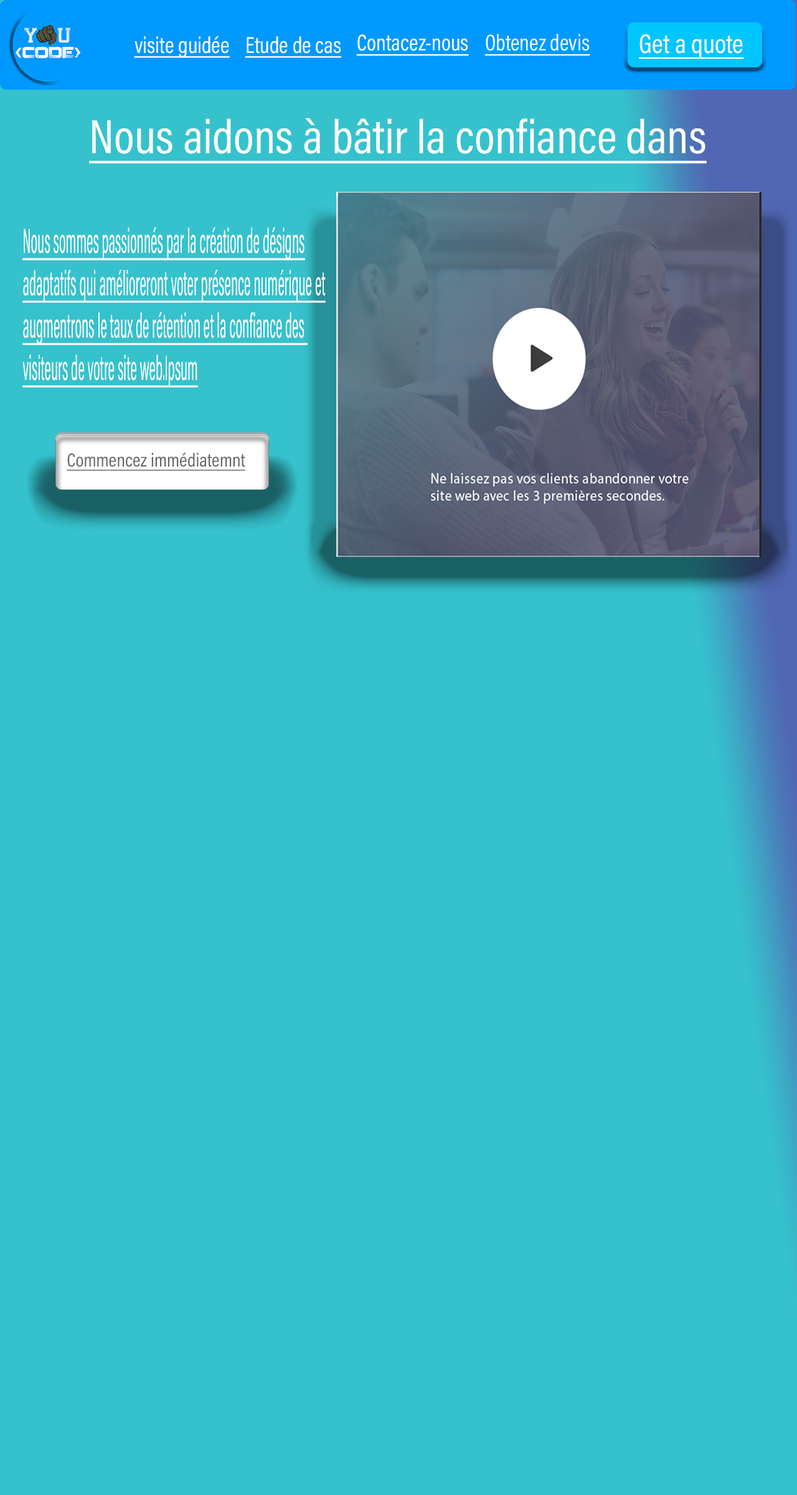
<style>
.page{position:relative;width:797px;height:1495px;background:#35c2cd}
.page>*{position:absolute;margin:0}
.t1{font:23.1px "AcuminConcept-Condensed";color:#ffffff;text-decoration:underline;scale:0.96 1}
.t2{font:27px "AcuminConcept-Condensed";color:#ffffff;text-decoration:underline}
.t3{font:48.4px "AcuminConcept-Condensed";color:#ffffff;text-decoration:underline}
.t4{font:35.3px "AcuminConcept-Condensed";color:#ffffff;text-decoration:underline;scale:0.45 1}
.t5{font:19.2px "AcuminConcept-Condensed";color:#666666;text-decoration:underline}
</style>
<div class="page">
<p class="t1" style="left:134px;top:36px;width:96px;height:22px">visite guidée</p>
<p class="t1" style="left:245px;top:36px;width:96px;height:22px">Etude de cas</p>
<p class="t1" style="left:356px;top:34px;width:113px;height:22px">Contacez-nous</p>
<p class="t2" style="left:639px;top:34px;width:106px;height:25px">Get a quote</p>
<p class="t3" style="left:89px;top:118px;width:618px;height:46px">Nous aidons à bâtir la confiance dans</p>
<p class="t4" style="left:22px;top:227px;width:304px;height:161px">Nous sommes passionnés par la création de désigns<br>adaptatifs qui amélioreront voter présence numérique et<br>augmentrons le taux de rétention et la confiance des <br>visiteurs de votre site web.Ipsum</p>
<p class="t5" style="left:67px;top:452px;width:178px;height:19px">Commencez immédiatemnt</p>
</div>
